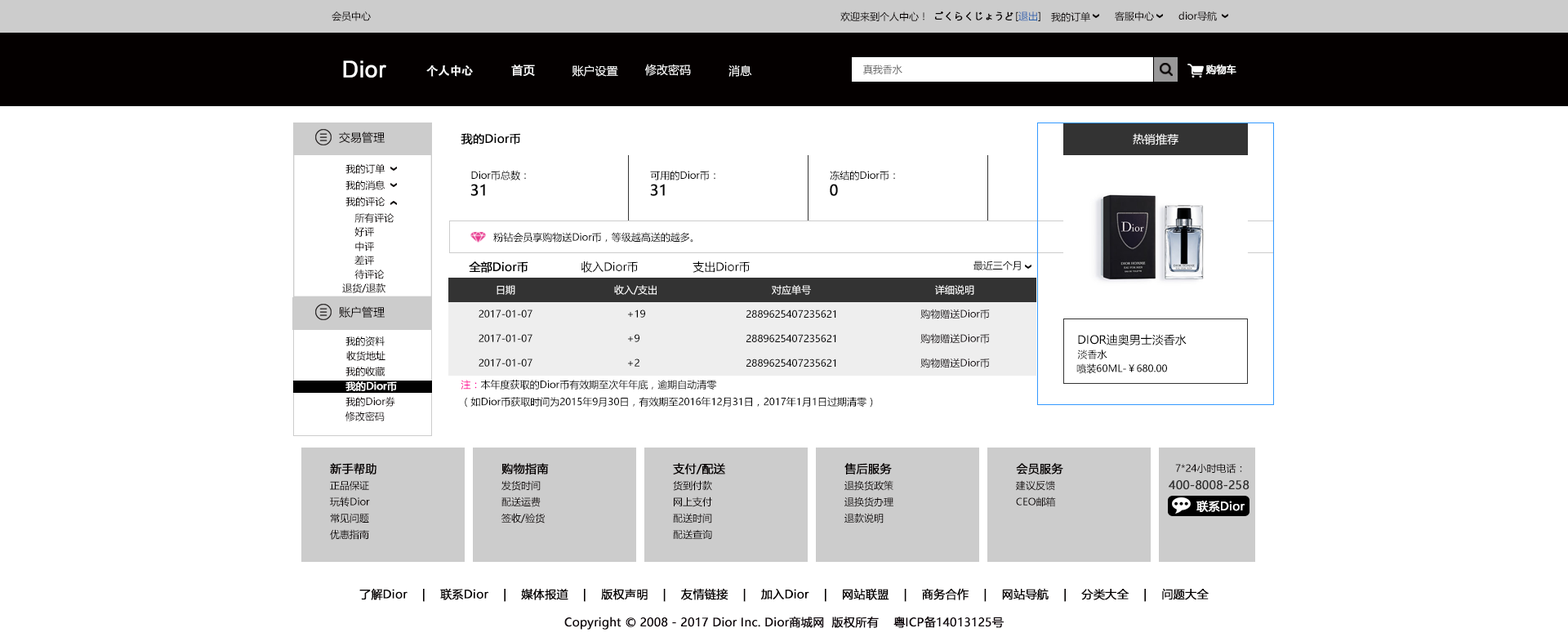
<style>
.page{position:relative;width:1568px;height:637px;background:#ffffff}
.page>*{position:absolute;margin:0}
.t1{font:9.8px "MicrosoftYaHei";color:#040000}
.t2{font:9.8px "MicrosoftYaHei";color:#040000;font-weight:bold}
.t3{font:9.8px "MicrosoftYaHei";color:#2a62ae}
.t4{font:22.9px "ArialMT";color:#ffffff;font-weight:bold}
.t5{font:11.4px "AdobeHeitiStd-Regular";color:#ffffff;font-weight:bold}
.t6{font:11.4px "MicrosoftYaHei";color:#ffffff;font-weight:bold}
.t7{font:11.4px "MicrosoftYaHei";color:#ffffff}
.t8{font:9.8px "MicrosoftYaHei";color:#666666}
.t9{font:9.8px "MicrosoftYaHei";color:#ffffff;font-weight:bold}
.t10{font:11.4px "MicrosoftYaHei";color:#040000}
.t11{font:11.4px "MicrosoftYaHei";color:#000000;font-weight:bold}
.t12{font:9.8px "MicrosoftYaHei";color:#000000}
.t13{font:14.7px "MicrosoftYaHei";color:#000000;font-weight:bold}
.t14{font:11.4px "MicrosoftYaHei";color:#000000}
.t15{font:9.8px "MicrosoftYaHei";color:#ffffff}
.t16{font:9.8px "MicrosoftYaHei";color:#0e050a}
.t17{font:9.8px "MicrosoftYaHei";color:#060001}
.t18{font:9.8px "MicrosoftYaHei";color:#ff0099}
.t19{font:11.4px "MicrosoftYaHei";color:#040000;font-weight:bold}
.t20{font:11.4px "MicrosoftYaHei";color:#333333;font-weight:bold}
</style>
<div class="page">
<p class="t1" style="left:332px;top:11px;width:39px;height:10px">会员中心</p>
<p class="t1" style="left:840px;top:11px;width:84px;height:11px">欢迎来到个人中心！</p>
<p class="t2" style="left:935px;top:11px;width:78px;height:10px">ごくらくじょうど</p>
<p class="t3" style="left:1016px;top:11px;width:24px;height:10px"><span class="t1">[</span>退出<span class="t1">]</span></p>
<p class="t1" style="left:1051px;top:11px;width:39px;height:11px">我的订单</p>
<p class="t1" style="left:1115px;top:11px;width:39px;height:10px">客服中心</p>
<p class="t1" style="left:1178px;top:11px;width:39px;height:10px">dior导航</p>
<p class="t4" style="left:343px;top:60px;width:43px;height:18px">Dior</p>
<p class="t5" style="left:426px;top:65px;width:47px;height:12px">个人中心</p>
<p class="t6" style="left:511px;top:65px;width:24px;height:11px">首页</p>
<p class="t7" style="left:572px;top:65px;width:46px;height:12px">账户设置</p>
<p class="t7" style="left:645px;top:64px;width:46px;height:12px">修改密码</p>
<p class="t7" style="left:728px;top:65px;width:24px;height:12px">消息</p>
<p class="t8" style="left:863px;top:65px;width:39px;height:9px">真我香水</p>
<p class="t9" style="left:1205px;top:65px;width:31px;height:10px">购物车</p>
<p class="t10" style="left:339px;top:131px;width:46px;height:12px">交易管理</p>
<p class="t11" style="left:461px;top:133px;width:59px;height:12px">我的Dior币</p>
<p class="t7" style="left:1133px;top:133px;width:45px;height:12px">热销推荐</p>
<p class="t1" style="left:345px;top:163px;width:40px;height:11px">我的订单</p>
<p class="t12" style="left:471px;top:171px;width:55px;height:9px">Dior币总数：</p>
<p class="t12" style="left:650px;top:171px;width:65px;height:9px">可用的Dior币：</p>
<p class="t12" style="left:830px;top:171px;width:65px;height:9px">冻结的Dior币：</p>
<p class="t1" style="left:345px;top:180px;width:40px;height:10px">我的消息</p>
<p class="t13" style="left:470px;top:184px;width:15px;height:12px">31</p>
<p class="t13" style="left:650px;top:184px;width:15px;height:12px">31</p>
<p class="t13" style="left:830px;top:184px;width:8px;height:12px">0</p>
<p class="t1" style="left:345px;top:197px;width:40px;height:10px">我的评论</p>
<p class="t1" style="left:354px;top:213px;width:40px;height:10px">所有评论</p>
<p class="t1" style="left:354px;top:227px;width:20px;height:10px">好评</p>
<p class="t12" style="left:493px;top:232px;width:200px;height:11px">粉钻会员享购物送Dior币，等级越高送的越多。</p>
<p class="t1" style="left:355px;top:242px;width:19px;height:10px">中评</p>
<p class="t1" style="left:354px;top:255px;width:20px;height:10px">差评</p>
<p class="t1" style="left:354px;top:270px;width:31px;height:9px">待评论</p>
<p class="t11" style="left:469px;top:261px;width:59px;height:12px">全部Dior币</p>
<p class="t14" style="left:581px;top:261px;width:57px;height:12px">收入Dior币</p>
<p class="t14" style="left:693px;top:261px;width:57px;height:12px">支出Dior币</p>
<p class="t12" style="left:973px;top:261px;width:48px;height:9px">最近三个月</p>
<p class="t1" style="left:342px;top:283px;width:43px;height:10px">退货/退款</p>
<p class="t15" style="left:497px;top:285px;width:18px;height:10px">日期</p>
<p class="t15" style="left:614px;top:285px;width:43px;height:10px">收入/支出</p>
<p class="t15" style="left:772px;top:285px;width:39px;height:10px">对应单号</p>
<p class="t15" style="left:935px;top:285px;width:39px;height:10px">详细说明</p>
<p class="t10" style="left:339px;top:306px;width:46px;height:12px">账户管理</p>
<p class="t12" style="left:479px;top:310px;width:53px;height:8px">2017-01-07</p>
<p class="t12" style="left:628px;top:310px;width:17px;height:8px">+19</p>
<p class="t12" style="left:746px;top:310px;width:90px;height:8px">2889625407235621</p>
<p class="t16" style="left:920px;top:309px;width:70px;height:10px">购物赠送Dior币</p>
<p class="t12" style="left:345px;top:336px;width:40px;height:10px">我的资料</p>
<p class="t12" style="left:479px;top:334px;width:53px;height:8px">2017-01-07</p>
<p class="t12" style="left:628px;top:334px;width:11px;height:8px">+9</p>
<p class="t12" style="left:746px;top:334px;width:90px;height:8px">2889625407235621</p>
<p class="t16" style="left:920px;top:333px;width:70px;height:11px">购物赠送Dior币</p>
<p class="t14" style="left:1078px;top:334px;width:109px;height:11px">DIOR迪奥男士淡香水</p>
<p class="t17" style="left:346px;top:351px;width:39px;height:10px">收货地址</p>
<p class="t12" style="left:1077px;top:350px;width:30px;height:9px">淡香水</p>
<p class="t12" style="left:479px;top:359px;width:53px;height:8px">2017-01-07</p>
<p class="t12" style="left:628px;top:359px;width:11px;height:8px">+2</p>
<p class="t12" style="left:746px;top:359px;width:90px;height:8px">2889625407235621</p>
<p class="t16" style="left:920px;top:358px;width:70px;height:10px">购物赠送Dior币</p>
<p class="t12" style="left:1076px;top:363px;width:91px;height:11px">喷装60ML-￥680.00</p>
<p class="t17" style="left:345px;top:367px;width:40px;height:9px">我的收藏</p>
<p class="t9" style="left:345px;top:381px;width:52px;height:10px">我的Dior币</p>
<p class="t12" style="left:461px;top:380px;width:412px;height:28px"><span class="t18">注：</span>本年度获取的Dior币有效期至次年年底，逾期自动清零<br>（如Dior币获取时间为2015年9月30日，有效期至2016年12月31日，2017年1月1日过期清零）</p>
<p class="t17" style="left:345px;top:397px;width:50px;height:10px">我的Dior券</p>
<p class="t17" style="left:345px;top:412px;width:40px;height:9px">修改密码</p>
<p class="t19" style="left:330px;top:463px;width:46px;height:11px">新手帮助</p>
<p class="t19" style="left:330px;top:463px;width:46px;height:11px">新手帮助</p>
<p class="t19" style="left:501px;top:463px;width:48px;height:11px">购物指南</p>
<p class="t19" style="left:501px;top:463px;width:48px;height:11px">购物指南</p>
<p class="t19" style="left:673px;top:463px;width:52px;height:11px">支付/配送</p>
<p class="t19" style="left:673px;top:463px;width:52px;height:11px">支付/配送</p>
<p class="t19" style="left:844px;top:463px;width:48px;height:11px">售后服务</p>
<p class="t19" style="left:844px;top:463px;width:48px;height:11px">售后服务</p>
<p class="t19" style="left:1016px;top:463px;width:47px;height:11px">会员服务</p>
<p class="t19" style="left:1016px;top:463px;width:47px;height:11px">会员服务</p>
<p class="t1" style="left:1175px;top:463px;width:67px;height:11px">7*24小时电话：</p>
<p class="t1" style="left:1175px;top:463px;width:67px;height:11px">7*24小时电话：</p>
<p class="t1" style="left:330px;top:481px;width:39px;height:10px">正品保证</p>
<p class="t1" style="left:330px;top:481px;width:39px;height:10px">正品保证</p>
<p class="t1" style="left:501px;top:480px;width:40px;height:11px">发货时间</p>
<p class="t1" style="left:501px;top:480px;width:40px;height:11px">发货时间</p>
<p class="t1" style="left:673px;top:480px;width:39px;height:11px">货到付款</p>
<p class="t1" style="left:673px;top:480px;width:39px;height:11px">货到付款</p>
<p class="t1" style="left:844px;top:480px;width:49px;height:11px">退换货政策</p>
<p class="t1" style="left:844px;top:480px;width:49px;height:11px">退换货政策</p>
<p class="t1" style="left:1016px;top:480px;width:39px;height:11px">建议反馈</p>
<p class="t1" style="left:1016px;top:480px;width:39px;height:11px">建议反馈</p>
<p class="t20" style="left:1169px;top:480px;width:81px;height:10px">400-8008-258</p>
<p class="t20" style="left:1169px;top:480px;width:81px;height:10px">400-8008-258</p>
<p class="t1" style="left:330px;top:497px;width:40px;height:10px">玩转Dior</p>
<p class="t1" style="left:330px;top:497px;width:40px;height:10px">玩转Dior</p>
<p class="t1" style="left:501px;top:497px;width:40px;height:10px">配送运费</p>
<p class="t1" style="left:501px;top:497px;width:40px;height:10px">配送运费</p>
<p class="t1" style="left:674px;top:497px;width:38px;height:10px">网上支付</p>
<p class="t1" style="left:674px;top:497px;width:38px;height:10px">网上支付</p>
<p class="t1" style="left:844px;top:497px;width:49px;height:10px">退换货办理</p>
<p class="t1" style="left:844px;top:497px;width:49px;height:10px">退换货办理</p>
<p class="t1" style="left:1016px;top:497px;width:40px;height:10px">CEO邮箱</p>
<p class="t1" style="left:1016px;top:497px;width:40px;height:10px">CEO邮箱</p>
<p class="t6" style="left:1196px;top:501px;width:49px;height:11px">联系Dior</p>
<p class="t6" style="left:1196px;top:501px;width:49px;height:11px">联系Dior</p>
<p class="t1" style="left:330px;top:513px;width:39px;height:10px">常见问题</p>
<p class="t1" style="left:330px;top:513px;width:39px;height:10px">常见问题</p>
<p class="t1" style="left:501px;top:513px;width:44px;height:10px">签收/验货</p>
<p class="t1" style="left:501px;top:513px;width:44px;height:10px">签收/验货</p>
<p class="t1" style="left:673px;top:513px;width:39px;height:10px">配送时间</p>
<p class="t1" style="left:673px;top:513px;width:39px;height:10px">配送时间</p>
<p class="t1" style="left:844px;top:513px;width:40px;height:10px">退款说明</p>
<p class="t1" style="left:844px;top:513px;width:40px;height:10px">退款说明</p>
<p class="t1" style="left:330px;top:529px;width:39px;height:11px">优惠指南</p>
<p class="t1" style="left:330px;top:529px;width:39px;height:11px">优惠指南</p>
<p class="t1" style="left:673px;top:529px;width:39px;height:10px">配送查询</p>
<p class="t1" style="left:673px;top:529px;width:39px;height:10px">配送查询</p>
<p class="t19" style="left:359px;top:588px;width:850px;height:14px">了解Dior    |    联系Dior    |    媒体报道    |    版权声明    |    友情链接    |    加入Dior    |    网站联盟    |    商务合作    |    网站导航    |    分类大全    |    问题大全</p>
<p class="t19" style="left:359px;top:588px;width:850px;height:14px">了解Dior    |    联系Dior    |    媒体报道    |    版权声明    |    友情链接    |    加入Dior    |    网站联盟    |    商务合作    |    网站导航    |    分类大全    |    问题大全</p>
<p class="t11" style="left:564px;top:616px;width:440px;height:14px">Copyright © 2008 - 2017 Dior Inc. Dior商城网  版权所有    粤ICP备14013125号</p>
<p class="t11" style="left:564px;top:616px;width:440px;height:14px">Copyright © 2008 - 2017 Dior Inc. Dior商城网  版权所有    粤ICP备14013125号</p>
</div>
